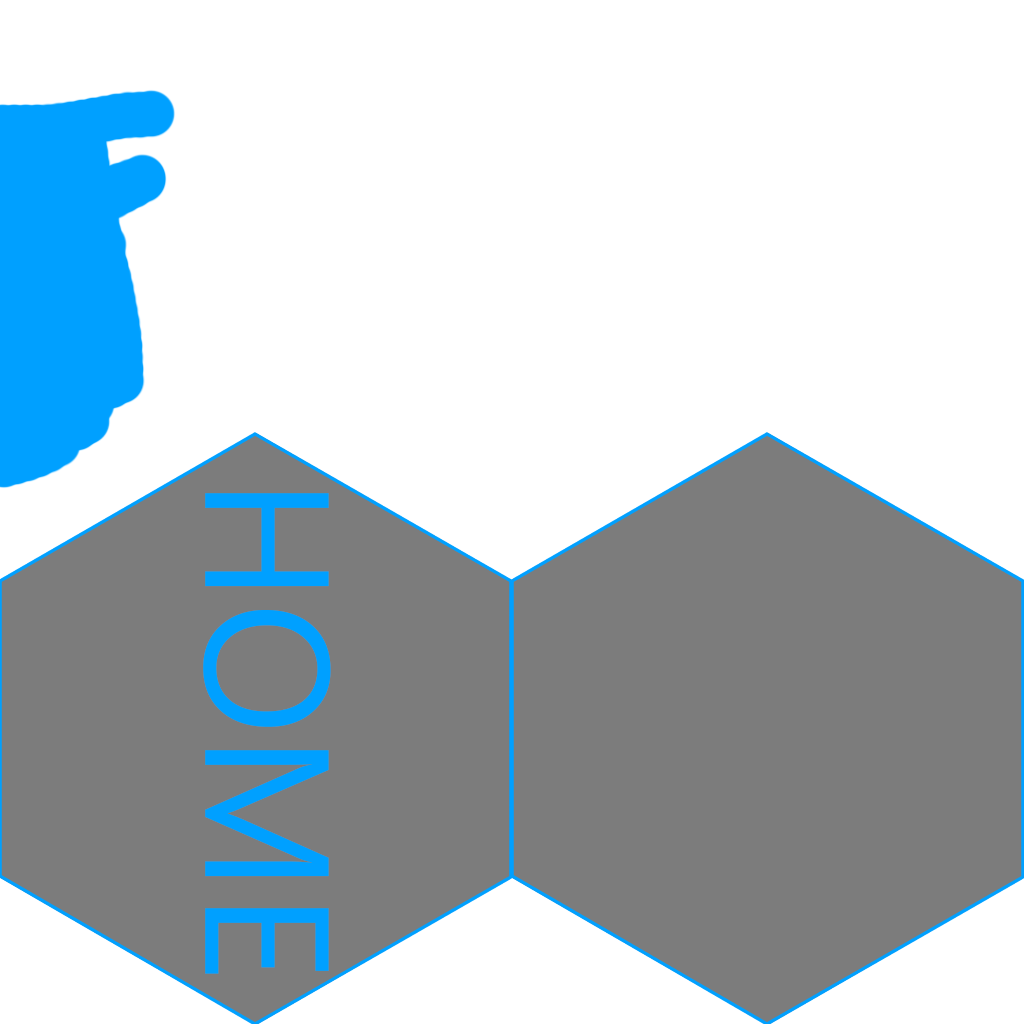
<style>
.page{position:relative;width:1024px;height:1024px;background:#ffffff}
.page>*{position:absolute;margin:0}
.t1{font:176px "SegoeUI";color:#00a0ff}
.t2{font:176px "SegoeUI";color:#ffffff}
</style>
<div class="page">
<p class="t1" style="left:203px;top:493px;width:128px;height:481px;rotate:90deg"><span class="t2"><br><br><br><br><br><br><br><br><br><br><br><br><br><br><br><br></span>HOME</p>
</div>
